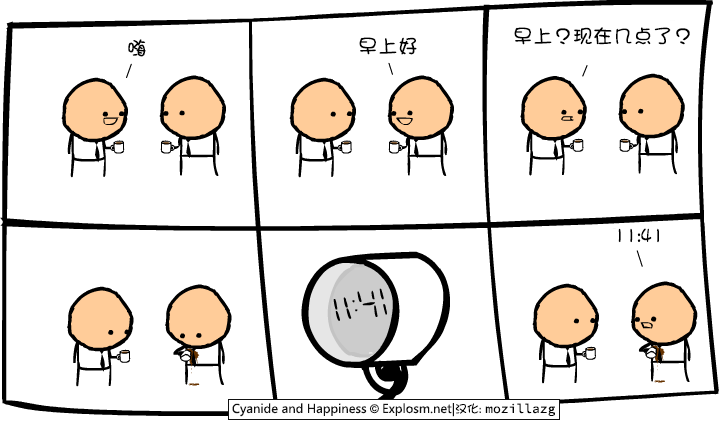
<style>
.page{position:relative;width:720px;height:425px;background:#ffffff}
.page>*{position:absolute;margin:0}
.t1{font:20px "DFGirl";color:#000000}
</style>
<div class="page">
<p class="t1" style="left:514px;top:27px;width:176px;height:18px">早上？现在几点了？</p>
<p class="t1" style="left:128px;top:39px;width:18px;height:18px">嗨</p>
<p class="t1" style="left:359px;top:37px;width:58px;height:18px">早上好</p>
<p class="t1" style="left:618px;top:228px;width:41px;height:15px">11:41</p>
</div>
